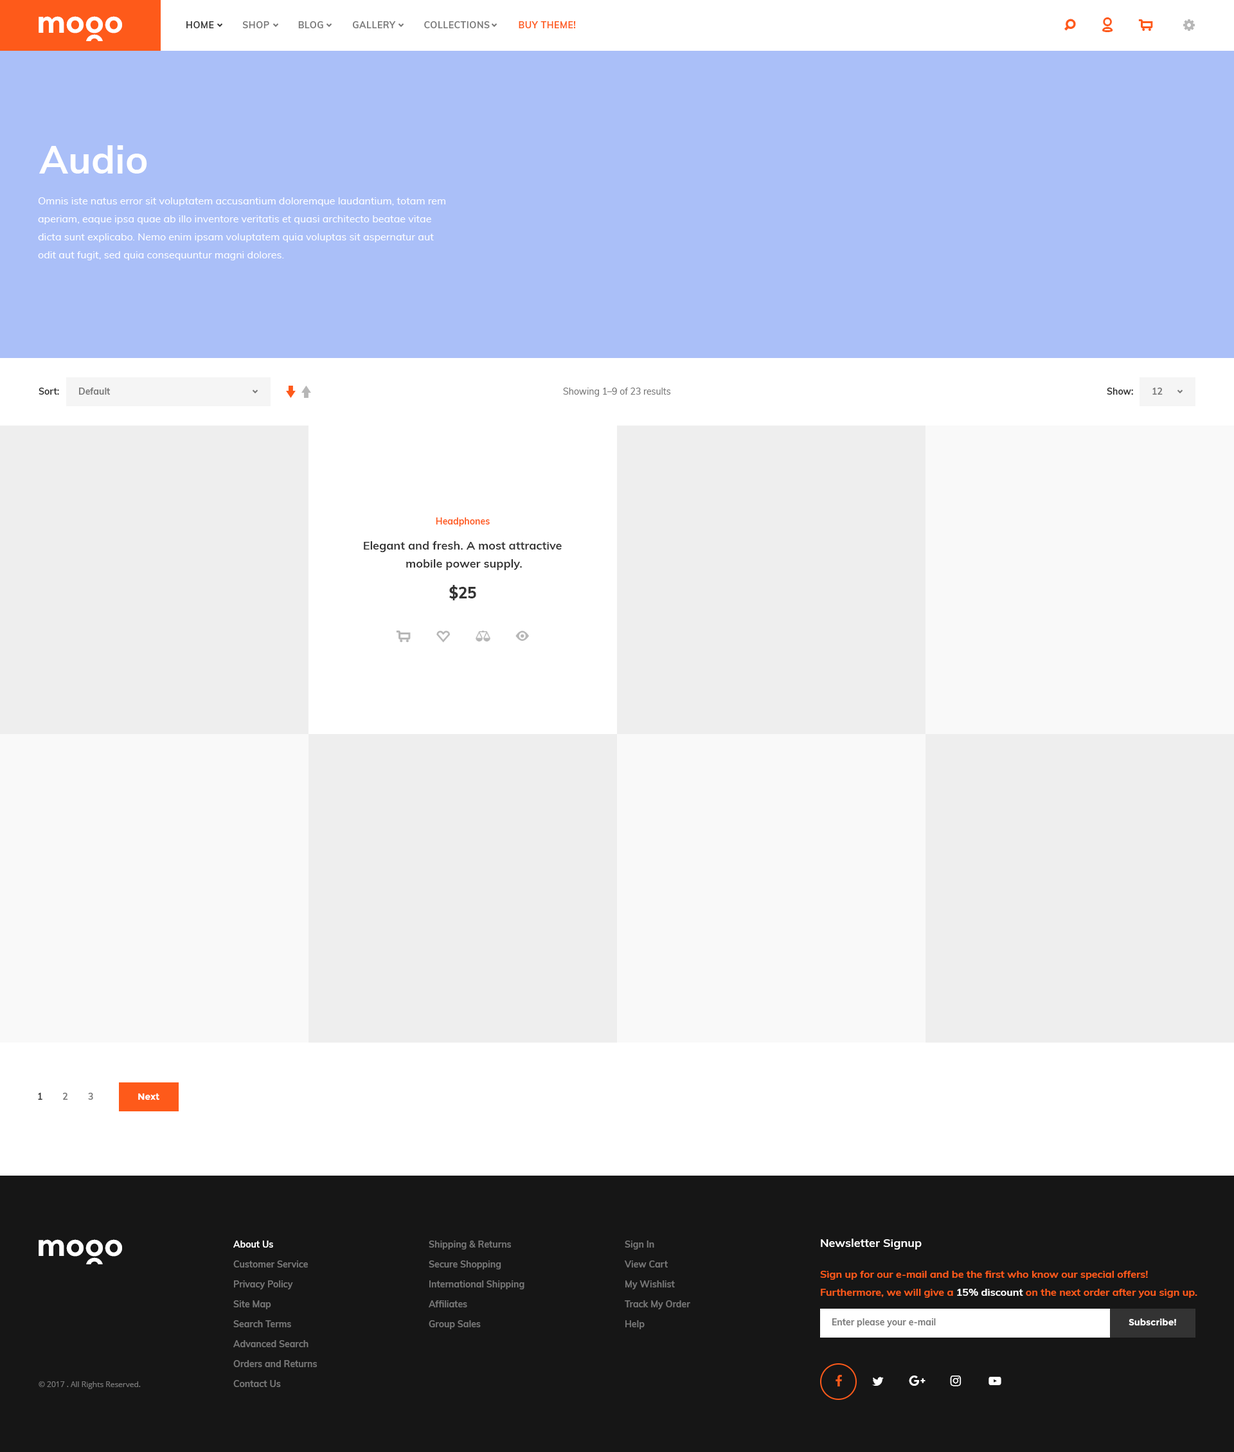
<style>
.page{position:relative;width:1234px;height:1452px;background:#ffffff}
.page>*{position:absolute;margin:0}
.t1{font:29.6px "Montserrat-Bold";color:#ffffff}
.t2{font:9px "Muli-Bold";letter-spacing:0.04em;color:#777777;text-transform:uppercase}
.t3{font:9px "Muli-Bold";letter-spacing:0.04em;color:#333333;text-transform:uppercase}
.t4{font:9px "Muli-Bold";letter-spacing:0.04em;color:#fe5a1a;text-transform:uppercase}
.t5{font:29.6px "Montserrat-Bold"}
.t6{font:38.6px "Muli-Bold";color:#ffffff}
.t7{font:10.3px/18px "Muli-Regular";color:#ffffff}
.t8{font:9px "Muli-Bold";color:#333333}
.t9{font:9px "Muli-Bold";color:#777777}
.t10{font:9px "Muli-Regular";color:#777777}
.t11{font:9px "Muli-Bold";color:#fe5a1a}
.t12{font:11.6px/18px "Muli-Bold";color:#333333}
.t13{font:15.4px "Muli-ExtraBold";color:#333333}
.t14{font:9px "Montserrat-Bold";color:#ffffff}
.t15{font:9px/19.9px "Muli-Bold";color:#777777}
.t16{font:9px/19.9px "Muli-Bold";color:#ffffff}
.t17{font:11.6px "Muli-Bold";color:#ffffff}
.t18{font:10.3px/18px "Muli-Bold";color:#fe5a1a}
.t19{font:10.3px/18px "Muli-Bold";color:#ffffff}
.t20{font:7.7px "OpenSans";color:#777777}
</style>
<div class="page">
<p class="t1" style="left:39px;top:16px;width:83px;height:17px">mooo</p>
<p class="t2" style="left:186px;top:21px;width:390px;height:7px"><span class="t3">hOME    </span>      Shop          bLOG          gALLERY          Collections          <span class="t4">BUY THEME!</span></p>
<p class="t5" style="left:86px;top:34px;width:17px;height:17px">o</p>
<p class="t6" style="left:39px;top:145px;width:108px;height:29px">Audio</p>
<p class="t7" style="left:38px;top:197px;width:408px;height:63px">Omnis iste natus error sit voluptatem accusantium doloremque laudantium, totam rem aperiam, eaque ipsa quae ab illo inventore veritatis et quasi architecto beatae vitae dicta sunt explicabo. Nemo enim ipsam voluptatem quia voluptas sit aspernatur aut odit aut fugit, sed quia consequuntur magni dolores.</p>
<p class="t8" style="left:39px;top:388px;width:20px;height:7px">Sort:</p>
<p class="t9" style="left:79px;top:388px;width:32px;height:7px">Default</p>
<p class="t10" style="left:563px;top:388px;width:108px;height:9px">Showing 1–9 of 23 results</p>
<p class="t8" style="left:1107px;top:388px;width:26px;height:7px">Show:</p>
<p class="t9" style="left:1153px;top:388px;width:10px;height:7px">12</p>
<p class="t11" style="left:436px;top:518px;width:54px;height:8px">Headphones</p>
<p class="t12" style="left:364px;top:541px;width:198px;height:29px;text-align:center">Elegant and fresh. A most attractive <br>mobile power supply.</p>
<p class="t13" style="left:449px;top:585px;width:27px;height:15px">$25</p>
<p class="t2" style="left:38px;top:1093px;width:55px;height:7px"><span class="t8">1 </span>      2       3</p>
<p class="t14" style="left:138px;top:1094px;width:21px;height:7px">Next</p>
<p class="t1" style="left:39px;top:1239px;width:83px;height:18px">mooo</p>
<p class="t15" style="left:233px;top:1241px;width:84px;height:146px"><span class="t16">About Us<br></span>Customer Service<br>Privacy Policy<br>Site Map<br>Search Terms<br>Advanced Search<br>Orders and Returns<br>Contact Us</p>
<p class="t15" style="left:429px;top:1241px;width:96px;height:88px">Shipping &amp; Returns<br>Secure Shopping<br>International Shipping<br>Affiliates<br>Group Sales</p>
<p class="t15" style="left:624px;top:1241px;width:66px;height:88px">Sign In<br>View Cart<br>My Wishlist<br>Track My Order<br>Help</p>
<p class="t17" style="left:821px;top:1239px;width:101px;height:11px">Newsletter Signup</p>
<p class="t18" style="left:820px;top:1271px;width:378px;height:28px">Sign up for our e-mail and be the first who know our special offers! <br>Furthermore, we will give a <span class="t19">15% discount</span> on the next order after you sign up.</p>
<p class="t9" style="left:833px;top:1318px;width:103px;height:10px">Enter please your e-mail</p>
<p class="t14" style="left:1129px;top:1318px;width:47px;height:8px">Subscribe!</p>
<p class="t20" style="left:39px;top:1382px;width:102px;height:7px">© 2017 . All Rights Reserved.</p>
</div>
